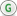
<style>
.page{position:relative;width:17px;height:16px}
.page>*{position:absolute;margin:0}
.t1{font:11px "Menlo-Bold";color:#359946}
</style>
<div class="page">
<p class="t1" style="left:5px;top:3px;width:6px;height:9px">G</p>
</div>
